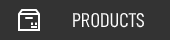
<style>
.page{position:relative;width:170px;height:40px;background:#333333}
.page>*{position:absolute;margin:0}
.t1{font:20px "D-DINCondensed";color:#ffffff}
</style>
<div class="page">
<p class="t1" style="left:73px;top:12px;width:71px;height:16px">PRODUCTS</p>
</div>
